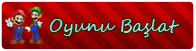
<style>
.page{position:relative;width:196px;height:51px}
.page>*{position:absolute;margin:0}
.t1{font:18px "SegoeScript";letter-spacing:-0.005em;color:#b2d9e7;scale:0.96 1}
</style>
<div class="page">
<p class="t1" style="left:49px;top:19px;width:131px;height:19px">Oyunu Başlat</p>
</div>
